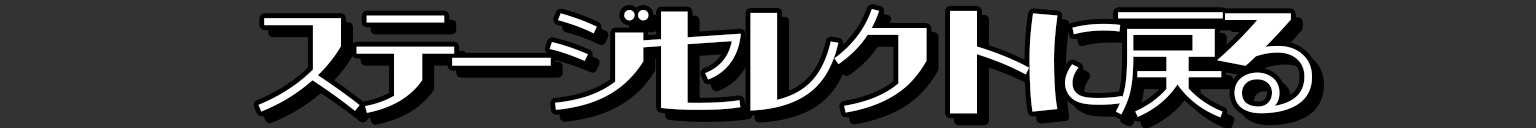
<style>
.page{position:relative;width:1536px;height:128px;background:#333333}
.page>*{position:absolute;margin:0}
.t1{font:116.7px "AB-lineboard_bold";letter-spacing:-0.18em;color:#ffffff}
</style>
<div class="page">
<p class="t1" style="left:258px;top:9px;width:1054px;height:109px">ステージセレクトに戻る</p>
</div>
